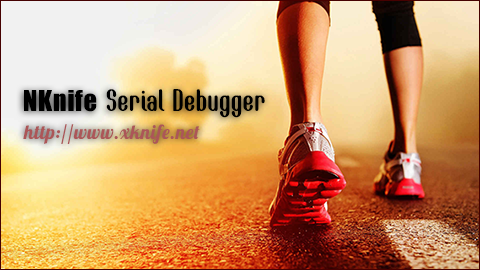
<style>
.page{position:relative;width:480px;height:270px}
.page>*{position:absolute;margin:0}
.t1{font:31.9px "Callie-Mae";letter-spacing:0.025em;color:#000000}
.t2{font:26.4px "Impact";letter-spacing:0.025em;color:#000000}
.t3{font:19.4px "Lobster-Regular";letter-spacing:0.025em;color:#ac5658}
</style>
<div class="page">
<p class="t1" style="left:24px;top:89px;width:241px;height:29px"><span class="t2">NKnife </span>Serial Debugger</p>
<p class="t3" style="left:23px;top:124px;width:177px;height:20px">http://www.xknife.net</p>
</div>
